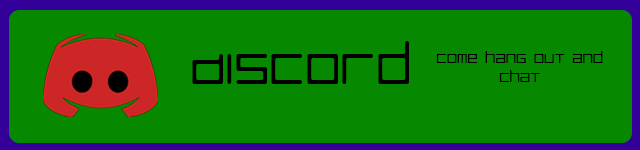
<style>
.page{position:relative;width:640px;height:150px;background:#068900}
.page>*{position:absolute;margin:0}
.t1{font:55px "LuggageRoundLight";color:#000000}
.t2{font:16px "LuggageRoundLight";color:#000000}
</style>
<div class="page">
<p class="t1" style="left:192px;top:41px;width:217px;height:43px">Discord</p>
<p class="t2" style="left:436px;top:51px;width:167px;height:31px;text-align:center">Come hang out and chat</p>
</div>
